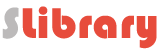
<style>
.page{position:relative;width:166px;height:50px;background:#ffffff}
.page>*{position:absolute;margin:0}
.t1{font:44px "Bauhaus93";color:#e74c3c;font-weight:bold}
.t2{font:44px "Bauhaus93";color:#bcbaba;font-weight:bold}
</style>
<div class="page">
<p class="t1" style="left:2px;top:6px;width:155px;height:43px"><span class="t2">S</span>Library</p>
</div>
